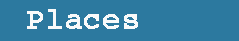
<style>
.page{position:relative;width:239px;height:41px;background:#2c799f}
.page>*{position:absolute;margin:0}
.t1{font:30px "Courier";color:#f9fafa;font-weight:bold}
</style>
<div class="page">
<p class="t1" style="left:27px;top:9px;width:111px;height:20px">Places</p>
</div>
